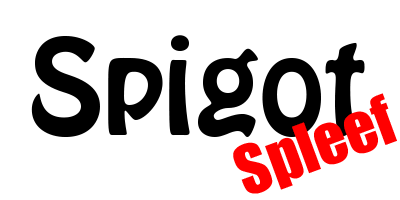
<style>
.page{position:relative;width:400px;height:200px;background:#ffffff}
.page>*{position:absolute;margin:0}
.t1{font:116.7px "HoboStd";color:#000000}
.t2{font:62.5px "Impact";color:#ff0000}
</style>
<div class="page">
<p class="t1" style="left:31px;top:35px;width:334px;height:102px">Spigot</p>
<p class="t2" style="left:233px;top:93px;width:164px;height:101px;rotate:-20deg">Spleef</p>
</div>
